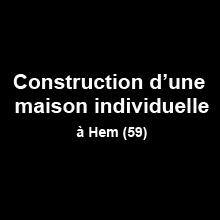
<style>
.page{position:relative;width:220px;height:220px;background:#000000}
.page>*{position:absolute;margin:0}
.t1{font:21px/24px "Arial-BoldMT";color:#fcfafa}
.t2{font:14px/24px "Arial-BoldMT";color:#fcfafa}
</style>
<div class="page">
<p class="t1" style="left:13px;top:74px;width:196px;height:66px;text-align:center">Construction d’une <br>maison individuelle<br><span class="t2">à Hem (59)</span></p>
</div>
